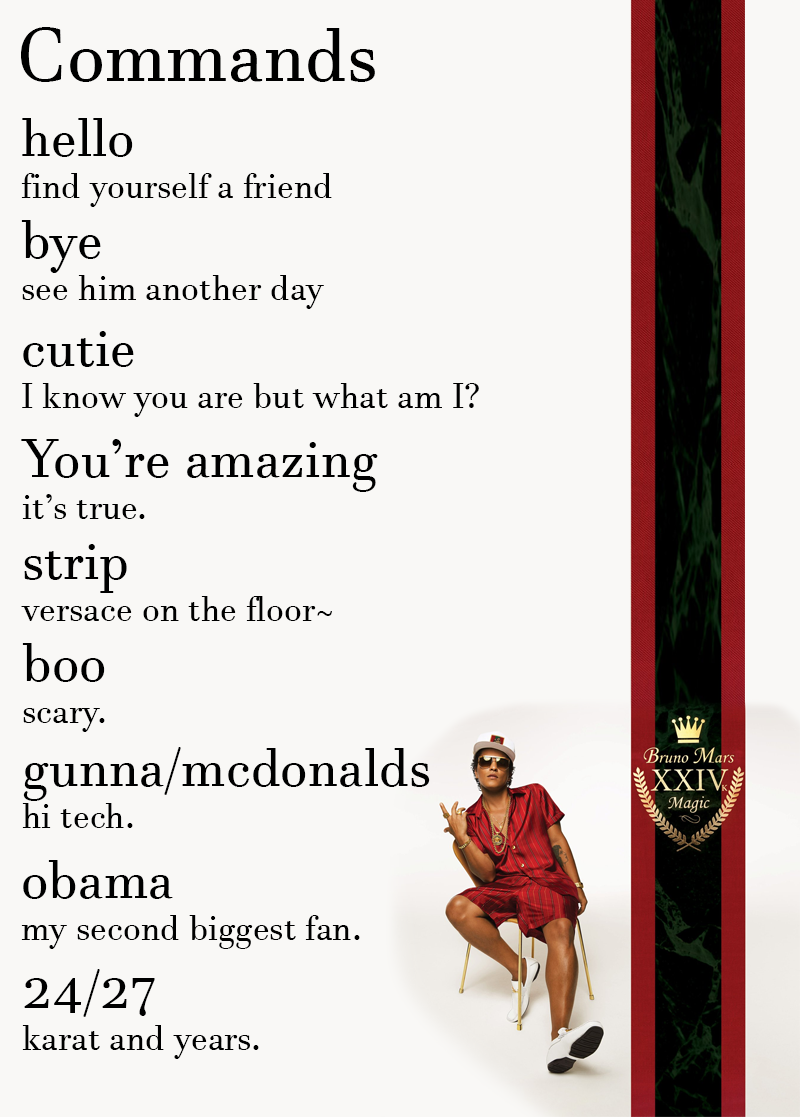
<style>
.page{position:relative;width:800px;height:1117px;background:#f9f8f6}
.page>*{position:absolute;margin:0}
.t1{font:75px "JavaneseText";color:#000000}
.t2{font:35px "JavaneseText";color:#000000}
.t3{font:54px "JavaneseText";color:#000000}
</style>
<div class="page">
<p class="t1" style="left:21px;top:27px;width:354px;height:55px">Commands</p>
<p class="t2" style="left:21px;top:118px;width:311px;height:89px"><span class="t3">hello<br></span>find yourself a friend</p>
<p class="t2" style="left:21px;top:220px;width:303px;height:89px"><span class="t3">bye<br></span>see him another day</p>
<p class="t2" style="left:22px;top:331px;width:457px;height:86px"><span class="t3">cutie<br></span>I know you are but what am I?</p>
<p class="t3" style="left:21px;top:439px;width:357px;height:80px">You’re amazing<br><span class="t2">it’s true.</span></p>
<p class="t2" style="left:21px;top:544px;width:311px;height:77px"><span class="t3">strip<br></span>versace on the floor~</p>
<p class="t2" style="left:22px;top:643px;width:83px;height:89px"><span class="t3">boo<br></span>scary.</p>
<p class="t3" style="left:22px;top:747px;width:408px;height:81px">gunna/mcdonalds<br><span class="t2">hi tech.</span></p>
<p class="t2" style="left:21px;top:860px;width:339px;height:89px"><span class="t3">obama<br></span>my second biggest fan.</p>
<p class="t2" style="left:22px;top:969px;width:237px;height:90px"><span class="t3">24/27<br></span>karat and years.</p>
</div>
